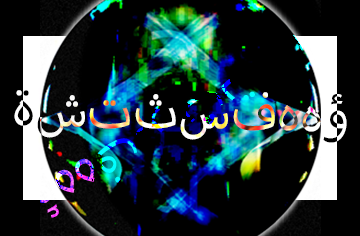
<style>
.page{position:relative;width:360px;height:236px;background:#000000}
.page>*{position:absolute;margin:0}
.t1{font:72px "MyriadArabic-Regular"}
</style>
<div class="page">
<p class="t1" style="left:14px;top:90px;width:333px;height:53px;rotate:1deg">ةشتثسفههؤ</p>
</div>
